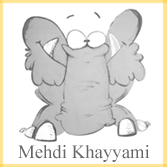
<style>
.page{position:relative;width:167px;height:167px;background:#ffffff}
.page>*{position:absolute;margin:0}
.t1{font:18.8px "TimesNewRomanPSMT";color:#666666}
</style>
<div class="page">
<p class="t1" style="left:18px;top:145px;width:132px;height:17px">Mehdi Khayyami</p>
</div>
